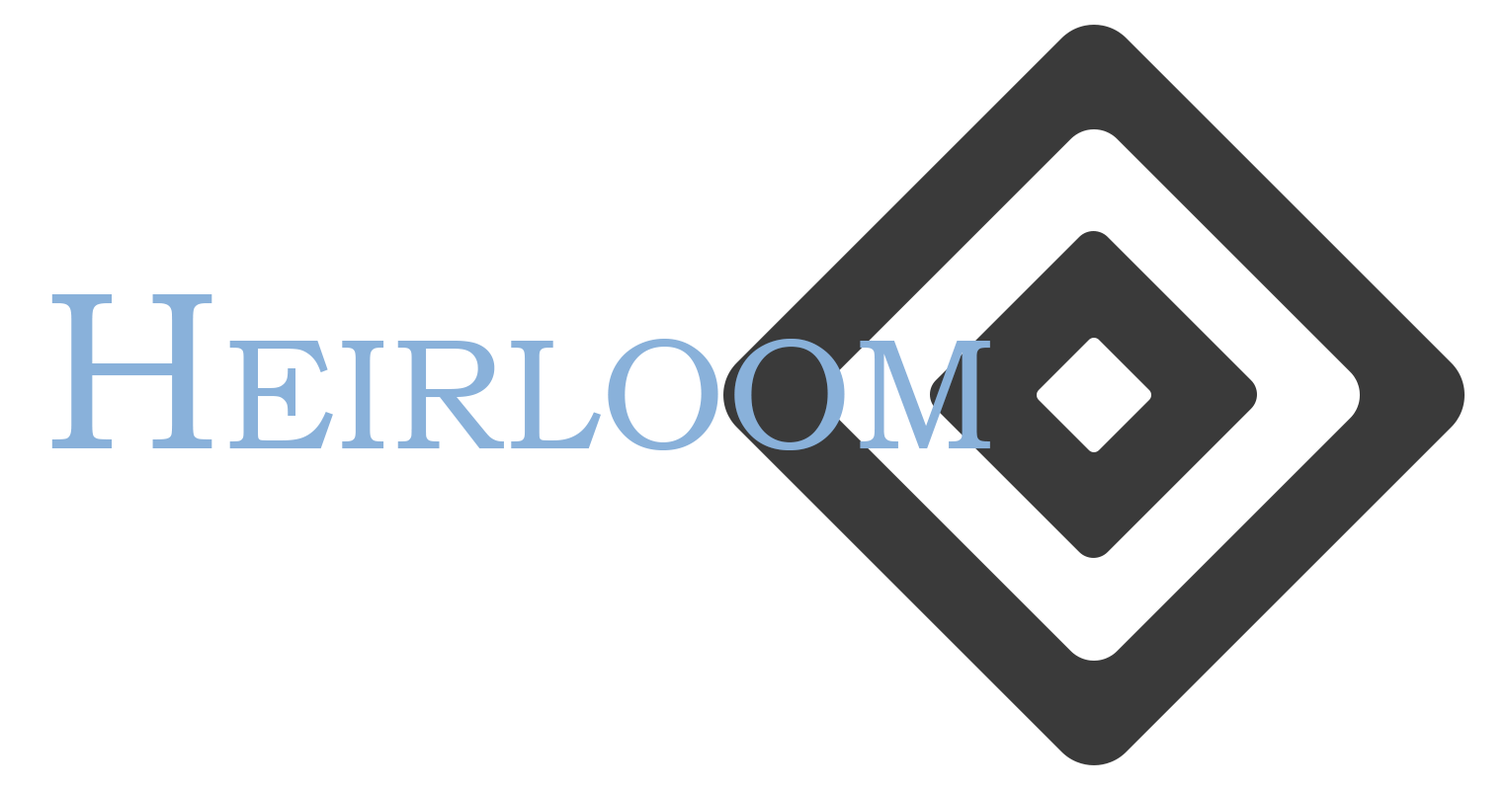
<style>
.page{position:relative;width:1509px;height:790px;background:#ffffff}
.page>*{position:absolute;margin:0}
.t1{font:226.2px "BookmanOldStyle";color:#89b1da;font-variant:small-caps}
</style>
<div class="page">
<p class="t1" style="left:51px;top:294px;width:939px;height:157px">Heirloom</p>
</div>
